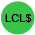
<style>
.page{position:relative;width:35px;height:35px;background:#39c449}
.page>*{position:absolute;margin:0}
.t1{font:11.2px "ArialMT";color:#000000}
</style>
<div class="page">
<p class="t1" style="left:5px;top:14px;width:27px;height:9px">LCL$</p>
</div>
